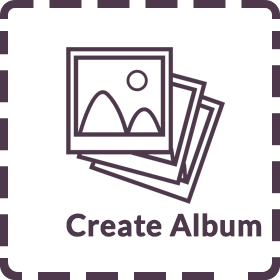
<style>
.page{position:relative;width:280px;height:280px;background:#ffffff}
.page>*{position:absolute;margin:0}
.t1{font:30px "Lato-Bold";color:#4d394b;font-weight:bold}
</style>
<div class="page">
<p class="t1" style="left:66px;top:213px;width:196px;height:24px">Create Album</p>
</div>
